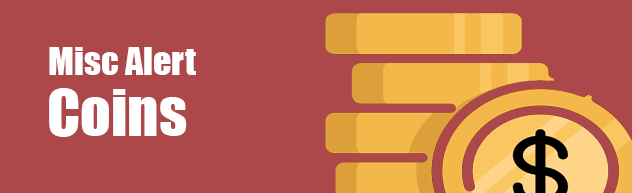
<style>
.page{position:relative;width:632px;height:193px;background:#ad484a}
.page>*{position:absolute;margin:0}
.t1{font:36px "Impact";color:#ffffff}
.t2{font:60px "Impact";color:#ffffff}
</style>
<div class="page">
<p class="t1" style="left:49px;top:47px;width:147px;height:28px">Misc Alert</p>
<p class="t2" style="left:49px;top:88px;width:138px;height:49px">Coins</p>
</div>
